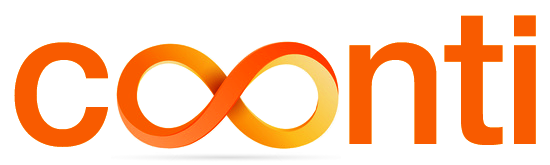
<style>
.page{position:relative;width:550px;height:165px;background:#ffffff}
.page>*{position:absolute;margin:0}
.t1{font:191px "HelveticaNeue-Medium";letter-spacing:-0.025em;color:#f85b00}
.t2{font:191px "HelveticaNeue-Medium";color:#f85b00}
</style>
<div class="page">
<p class="t1" style="left:14px;top:7px;width:522px;height:140px"><span class="t2">c    </span>nti</p>
</div>
